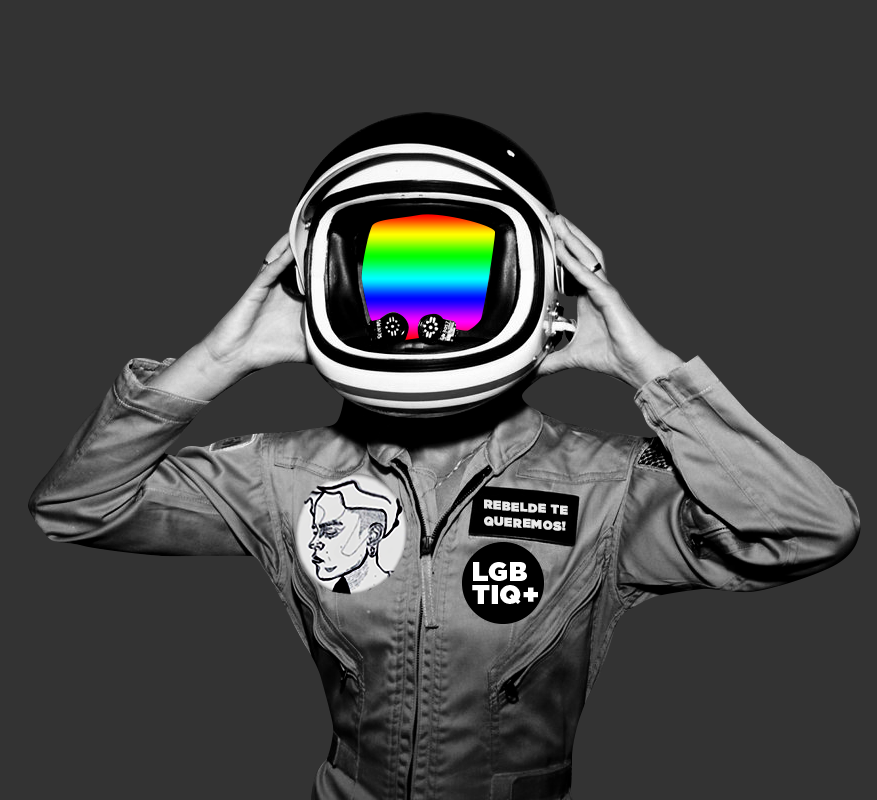
<style>
.page{position:relative;width:877px;height:800px;background:#333333}
.page>*{position:absolute;margin:0}
.t1{font:12.3px/16px "Gotham-Ultra";letter-spacing:0.025em;color:#e9e9e9;text-transform:uppercase;font-weight:bold}
</style>
<div class="page">
<p class="t1" style="left:484px;top:499px;width:84px;height:32px;rotate:4deg">rebelde te <br>queremos!</p>
</div>
